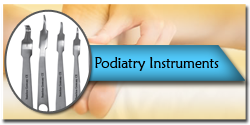
<style>
.page{position:relative;width:250px;height:125px}
.page>*{position:absolute;margin:0}
.t1{font:15px "MaiandraGD-Regular";color:#000000;scale:0.92 1}
</style>
<div class="page">
<p class="t1" style="left:95px;top:57px;width:124px;height:14px">Podiatry Instruments</p>
</div>
